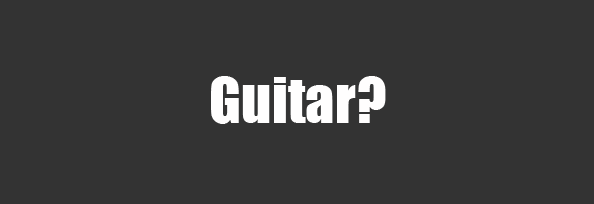
<style>
.page{position:relative;width:594px;height:204px;background:#333333}
.page>*{position:absolute;margin:0}
.t1{font:58.3px "Impact";color:#fffefe}
</style>
<div class="page">
<p class="t1" style="left:211px;top:76px;width:175px;height:48px">Guitar?</p>
</div>
